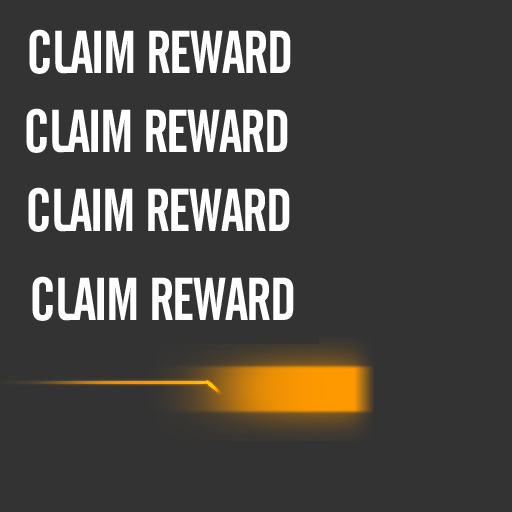
<style>
.page{position:relative;width:512px;height:512px;background:#333333}
.page>*{position:absolute;margin:0}
.t1{font:60px "UTM-Cafeta";letter-spacing:-0.025em;color:#ffffff;text-transform:uppercase}
</style>
<div class="page">
<p class="t1" style="left:29px;top:29px;width:262px;height:45px">claim Reward</p>
<p class="t1" style="left:26px;top:108px;width:262px;height:45px">claim Reward</p>
<p class="t1" style="left:28px;top:187px;width:262px;height:45px">claim Reward</p>
<p class="t1" style="left:32px;top:276px;width:262px;height:45px">claim Reward</p>
</div>
